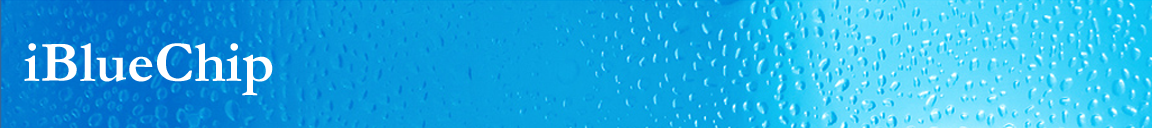
<style>
.page{position:relative;width:1152px;height:128px}
.page>*{position:absolute;margin:0}
.t1{font:58.3px "Garamond-Bold";color:#ffffff}
</style>
<div class="page">
<p class="t1" style="left:24px;top:43px;width:249px;height:53px">iBlueChip</p>
</div>
